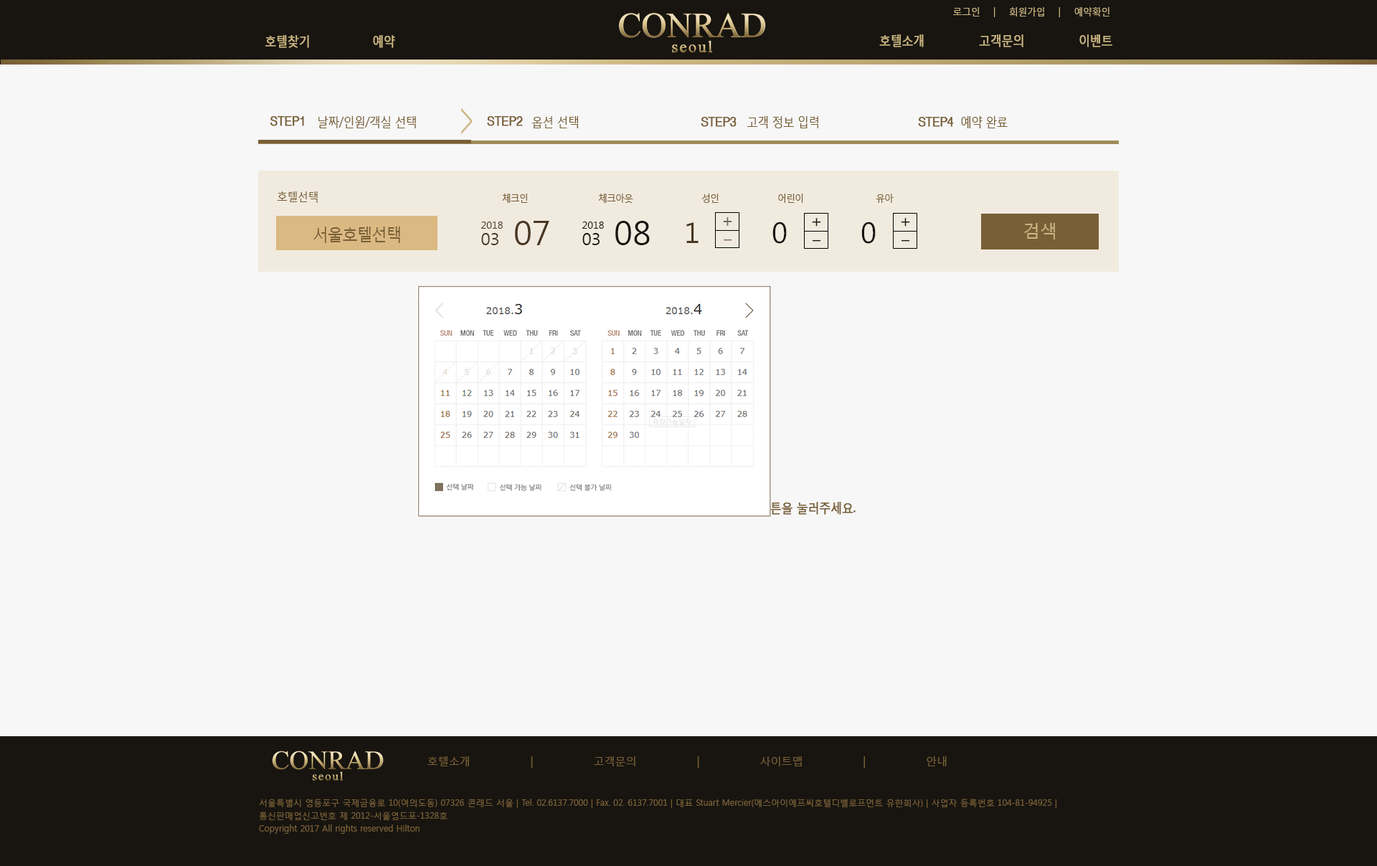
<style>
.page{position:relative;width:1377px;height:866px;background:#f7f7f7}
.page>*{position:absolute;margin:0}
.t1{font:10px "MalgunGothicRegular";color:#cbb682;scale:0.9 1}
.t2{font:12.9px "MalgunGothicRegular";letter-spacing:-0.05em;color:#cbb682;font-weight:bold;scale:0.9 1}
.t3{font:28.7px "NanumGothic";color:#cbb682;scale:0.9 1}
.t4{font:12.9px "Helvetica";letter-spacing:-0.05em;color:#785f37;font-weight:bold;scale:0.9 1}
.t5{font:12.9px "MalgunGothicRegular";letter-spacing:-0.05em;color:#785f37;scale:0.9 1}
.t6{font:13px "MalgunGothicRegular";letter-spacing:-0.05em;color:#785f37;scale:0.89 1}
.t7{font:13px "Helvetica";letter-spacing:-0.05em;color:#785f37;font-weight:bold;scale:0.89 1}
.t8{font:13px "MalgunGothicRegular";letter-spacing:-0.05em;color:#785f37;scale:0.88 1}
.t9{font:12.2px "MalgunGothicRegular";letter-spacing:-0.05em;color:#785f37;scale:0.9 1}
.t10{font:10px "MalgunGothicRegular";letter-spacing:-0.05em;color:#785f37;scale:0.9 1}
.t11{font:10.3px "MalgunGothicRegular";letter-spacing:-0.05em;color:#785f37;scale:0.88 1}
.t12{font:10px "MalgunGothicRegular";color:#493722}
.t13{font:33.7px "MalgunGothicRegular";color:#493722}
.t14{font:10px "MalgunGothicRegular";color:#181510}
.t15{font:33.7px "MalgunGothicRegular";color:#181510}
.t16{font:17.2px "MalgunGothicRegular";color:#716a63}
.t17{font:28.7px "MalgunGothicRegular";color:#181510}
.t18{font:17.1px "MalgunGothicRegular";color:#181510}
.t19{font:17.2px "MalgunGothicRegular";letter-spacing:-0.05em;color:#785f37;scale:0.9 1}
.t20{font:17.2px "MalgunGothicRegular";color:#493722}
.t21{font:17.2px "MalgunGothicRegular";color:#181510}
.t22{font:28.7px "MalgunGothicRegular";color:#493722}
.t23{font:17.2px "MalgunGothicRegular";color:#cbb682}
.t24{font:17.1px "MalgunGothicRegular";color:#716a63;scale:1.74 1}
.t25{font:17.1px "MalgunGothicRegular";color:#181510;scale:1.74 1}
.t26{font:12.9px "MalgunGothicRegular";letter-spacing:-0.05em;color:#ffffff;font-weight:bold;scale:0.9 1}
.t27{font:10.8px "MalgunGothicRegular";color:#785f37}
.t28{font:8.6px/12.9px "MalgunGothicRegular";color:#785f37}
</style>
<div class="page">
<p class="t1" style="left:953px;top:7px;width:156px;height:10px">로그인 | 회원가입 | 예약확인</p>
<p class="t2" style="left:265px;top:35px;width:44px;height:13px">호텔찾기</p>
<p class="t2" style="left:373px;top:35px;width:22px;height:13px">예약</p>
<p class="t2" style="left:879px;top:34px;width:233px;height:13px">호텔소개 고객문의 이벤트</p>
<p class="t3" style="left:461px;top:108px;width:12px;height:26px">&gt;</p>
<p class="t4" style="left:270px;top:116px;width:34px;height:10px">STEP1</p>
<p class="t5" style="left:318px;top:116px;width:98px;height:12px">날짜/인원/객실 선택</p>
<p class="t4" style="left:487px;top:116px;width:36px;height:10px">STEP2</p>
<p class="t6" style="left:531px;top:116px;width:47px;height:12px">옵션 선택</p>
<p class="t7" style="left:701px;top:117px;width:35px;height:10px">STEP3</p>
<p class="t6" style="left:746px;top:116px;width:72px;height:12px">고객 정보 입력</p>
<p class="t7" style="left:918px;top:117px;width:36px;height:10px">STEP4</p>
<p class="t8" style="left:961px;top:116px;width:46px;height:12px">예약 완료</p>
<p class="t9" style="left:277px;top:191px;width:41px;height:12px">호텔선택</p>
<p class="t10" style="left:502px;top:194px;width:26px;height:9px">체크인</p>
<p class="t11" style="left:598px;top:194px;width:35px;height:9px">체크아웃</p>
<p class="t11" style="left:701px;top:194px;width:17px;height:9px">성인</p>
<p class="t11" style="left:778px;top:194px;width:25px;height:9px">어린이</p>
<p class="t11" style="left:875px;top:194px;width:18px;height:9px">유아</p>
<p class="t12" style="left:481px;top:222px;width:22px;height:7px">2018</p>
<p class="t13" style="left:515px;top:221px;width:34px;height:24px">07</p>
<p class="t14" style="left:582px;top:222px;width:22px;height:7px">2018</p>
<p class="t15" style="left:615px;top:221px;width:35px;height:24px">08</p>
<p class="t16" style="left:723px;top:217px;width:9px;height:9px">+</p>
<p class="t17" style="left:772px;top:222px;width:15px;height:22px">0</p>
<p class="t18" style="left:812px;top:218px;width:9px;height:9px">+</p>
<p class="t17" style="left:861px;top:222px;width:14px;height:22px">0</p>
<p class="t18" style="left:901px;top:218px;width:9px;height:9px">+</p>
<p class="t19" style="left:313px;top:227px;width:87px;height:16px">서울호텔선택</p>
<p class="t20" style="left:481px;top:233px;width:17px;height:12px">03</p>
<p class="t21" style="left:582px;top:233px;width:17px;height:12px">03</p>
<p class="t22" style="left:686px;top:222px;width:12px;height:21px">1</p>
<p class="t23" style="left:1024px;top:223px;width:31px;height:16px">검색</p>
<p class="t24" style="left:723px;top:239px;width:9px;height:2px">-</p>
<p class="t25" style="left:812px;top:240px;width:9px;height:2px">-</p>
<p class="t25" style="left:901px;top:240px;width:9px;height:2px">-</p>
<p class="t26" style="left:508px;top:502px;width:347px;height:13px">예약을 원하시는 호텔, 날짜, 인원을 선택 후 검색 버튼을 눌러주세요.</p>
<p class="t27" style="left:427px;top:756px;width:519px;height:12px">호텔소개 | 고객문의 | 사이트맵 | 안내</p>
<p class="t28" style="left:259px;top:799px;width:797px;height:35px">서울특별시 영등포구 국제금융로 10(여의도동) 07326 콘래드 서울 | Tel. 02.6137.7000 | Fax. 02. 6137.7001 | 대표 Stuart Mercier(에스아이에프씨호텔디벨로프먼트 유한회사) | 사업자 등록번호 104-81-94925 | 통신판매업신고번호 제 2012-서울영드포-1328호<br>Copyright 2017 All rights reserved Hilton</p>
</div>
